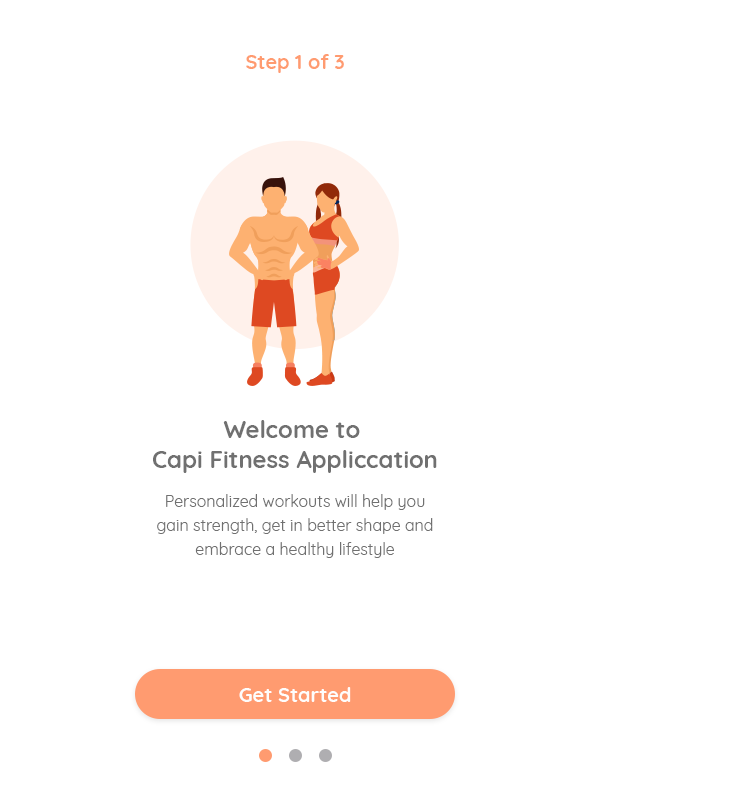
<style>
.page{position:relative;width:743px;height:812px;background:#ffffff}
.page>*{position:absolute;margin:0}
.t1{font:20px "Quicksand-Bold";color:#ff9b70}
.t2{font:24px/30px "Quicksand-Bold";color:#707070}
.t3{font:16px/24px "Quicksand-Regular";color:#707070}
.t4{font:20px "Quicksand-Bold";color:#fefdfc}
</style>
<div class="page">
<p class="t1" style="left:246px;top:54px;width:98px;height:19px">Step 1 of 3</p>
<p class="t2" style="left:153px;top:420px;width:284px;height:53px;text-align:center">Welcome to <br>Capi Fitness Appliccation</p>
<p class="t3" style="left:157px;top:494px;width:276px;height:64px;text-align:center">Personalized workouts will help you gain strength, get in better shape and embrace a healthy lifestyle</p>
<p class="t4" style="left:239px;top:687px;width:112px;height:15px">Get Started</p>
</div>
